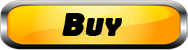
<style>
.page{position:relative;width:188px;height:50px}
.page>*{position:absolute;margin:0}
.t1{font:24px "BerlinSansFBDemi-Bold";letter-spacing:0.1em;color:#000000;font-style:italic}
.t2{font:31.4px "BerlinSansFBDemi-Bold";letter-spacing:0.1em;color:#000000;font-style:italic}
</style>
<div class="page">
<p class="t1" style="left:63px;top:14px;width:58px;height:21px"><span class="t2">B</span>UY</p>
</div>
